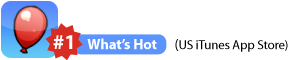
<style>
.page{position:relative;width:300px;height:60px;background:#ffffff}
.page>*{position:absolute;margin:0}
.t1{font:21.1px "MyriadPro-Bold";color:#ffffff}
.t2{font:13px "MyriadPro-Regular";letter-spacing:-0.01em;color:#000000}
.t3{font:14.8px "MyriadPro-Bold";letter-spacing:-0.01em;color:#ffffff}
.t4{font:14.8px "MyriadPro-Regular";letter-spacing:-0.01em;color:#000000}
</style>
<div class="page">
<p class="t1" style="left:53px;top:35px;width:20px;height:14px">#1</p>
<p class="t2" style="left:87px;top:38px;width:201px;height:14px"><span class="t3">What’s Hot      </span><span class="t4">(</span>US iTunes App Store)</p>
</div>
